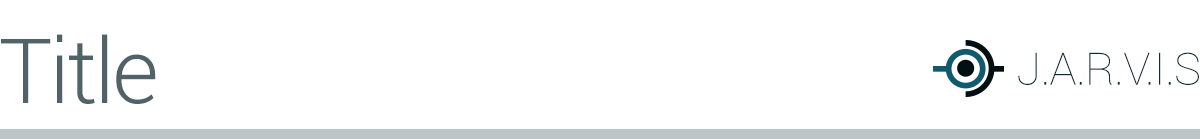
<style>
.page{position:relative;width:1200px;height:139px;background:#ffffff}
.page>*{position:absolute;margin:0}
.t1{font:90px "Roboto-Light";letter-spacing:-0.03em;color:#516268}
.t2{font:44.8px "Roboto-Thin";letter-spacing:-0.013em;color:#0d2c35}
</style>
<div class="page">
<p class="t1" style="left:1px;top:34px;width:155px;height:70px">Title</p>
<p class="t2" style="left:1018px;top:52px;width:181px;height:33px">J.A.R.V.I.S</p>
</div>
